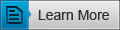
<style>
.page{position:relative;width:120px;height:30px}
.page>*{position:absolute;margin:0}
.t1{font:14px "ArialMT";color:#303136}
</style>
<div class="page">
<p class="t1" style="left:38px;top:10px;width:71px;height:10px">Learn More</p>
</div>
